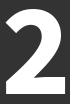
<style>
.page{position:relative;width:70px;height:104px;background:#333333}
.page>*{position:absolute;margin:0}
.t1{font:130.9px "SourceSansPro-Bold";letter-spacing:-0.05em;color:#ffffff}
</style>
<div class="page">
<p class="t1" style="left:5px;top:9px;width:61px;height:85px">2</p>
</div>
